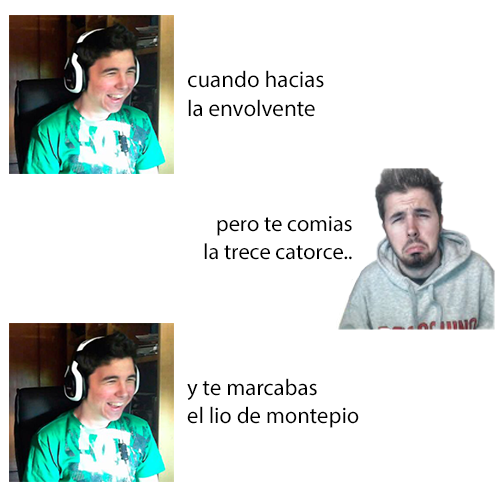
<style>
.page{position:relative;width:500px;height:500px;background:#ffffff}
.page>*{position:absolute;margin:0}
.t1{font:23.1px "MyriadPro-Regular";color:#000000}
.t2{font:22.3px "MyriadPro-Regular";color:#000000}
.t3{font:22.8px "MyriadPro-Regular";color:#000000}
</style>
<div class="page">
<p class="t1" style="left:188px;top:70px;width:136px;height:47px">cuando hacias<br>la envolvente</p>
<p class="t2" style="left:204px;top:216px;width:148px;height:44px;text-align:right">pero te comias<br>la trece catorce..</p>
<p class="t3" style="left:187px;top:378px;width:172px;height:50px">y te marcabas<br>el lio de montepio</p>
</div>
